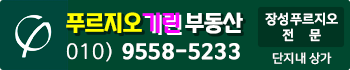
<style>
.page{position:relative;width:350px;height:70px;background:#00482f}
.page>*{position:absolute;margin:0}
.t1{font:23px "NIXGONB-Vb";letter-spacing:-0.075em;color:#ffff00;font-weight:bold}
.t2{font:23px "NIXGONB-Vb";letter-spacing:-0.075em;color:#fc00ff;font-weight:bold}
.t3{font:23px "NIXGONB-Vb";letter-spacing:-0.075em;color:#ffffff;font-weight:bold}
.t4{font:13px "NanumSquareOTFB";color:#ffffff;font-weight:bold}
.t5{font:20px "NanumBarunGothicOTFBold";letter-spacing:0.05em;color:#ffffff;font-weight:bold}
.t6{font:20px "NanumBarunGothicOTFUltraLight";letter-spacing:0.05em;color:#ffffff;font-weight:bold}
.t7{font:12px "NanumSquareOTFR";color:#ffffff;font-weight:bold}
</style>
<div class="page">
<p class="t1" style="left:66px;top:12px;width:76px;height:21px">푸르지오</p>
<p class="t2" style="left:142px;top:12px;width:38px;height:21px">기린</p>
<p class="t3" style="left:185px;top:12px;width:58px;height:22px">부동산</p>
<p class="t4" style="left:265px;top:12px;width:73px;height:30px;text-align:center">장성푸르지오<br>전    문</p>
<p class="t5" style="left:66px;top:42px;width:174px;height:20px"><span class="t6">010)</span> 9558-5233</p>
<p class="t7" style="left:272px;top:52px;width:60px;height:13px">단지내 상가</p>
</div>
